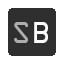
<style>
.page{position:relative;width:64px;height:64px;background:#ffffff}
.page>*{position:absolute;margin:0}
.t1{font:33.3px "OCRAExtended";color:#aeaeae}
.t2{font:33.3px "OCRAExtended";color:#ffffff}
</style>
<div class="page">
<p class="t1" style="left:14px;top:22px;width:34px;height:21px">S<span class="t2">B</span></p>
</div>
